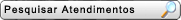
<style>
.page{position:relative;width:181px;height:20px}
.page>*{position:absolute;margin:0}
.t1{font:10px "ArialMT";letter-spacing:0.1em;color:#040404}
</style>
<div class="page">
<p class="t1" style="left:4px;top:5px;width:131px;height:10px">Pesquisar Atendimentos</p>
</div>
